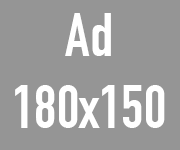
<style>
.page{position:relative;width:180px;height:150px;background:#959595}
.page>*{position:absolute;margin:0}
.t1{font:60px "DINCondensed-Bold";color:#ffffff}
</style>
<div class="page">
<p class="t1" style="left:15px;top:13px;width:150px;height:115px;text-align:center">Ad<br>180x150</p>
</div>
